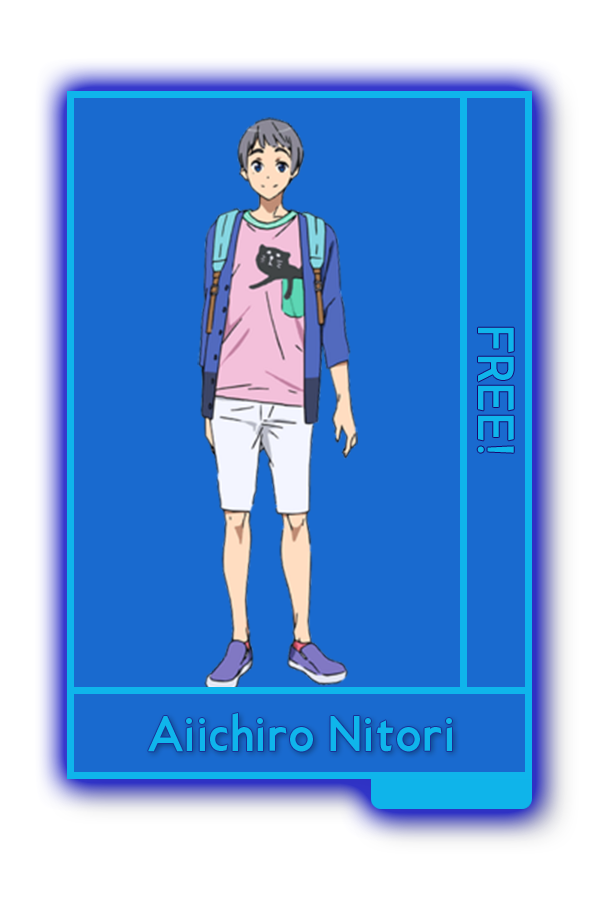
<style>
.page{position:relative;width:600px;height:900px;background:#196acf}
.page>*{position:absolute;margin:0}
.t1{font:47.8px "Ancillary-Bold";color:#0fb5eb}
.t2{font:46.7px "Ancillary-Bold";color:#0fb5eb}
</style>
<div class="page">
<p class="t1" style="left:477px;top:327px;width:37px;height:126px;rotate:90deg">FREE!</p>
<p class="t2" style="left:148px;top:713px;width:304px;height:39px">Aiichiro Nitori</p>
</div>
